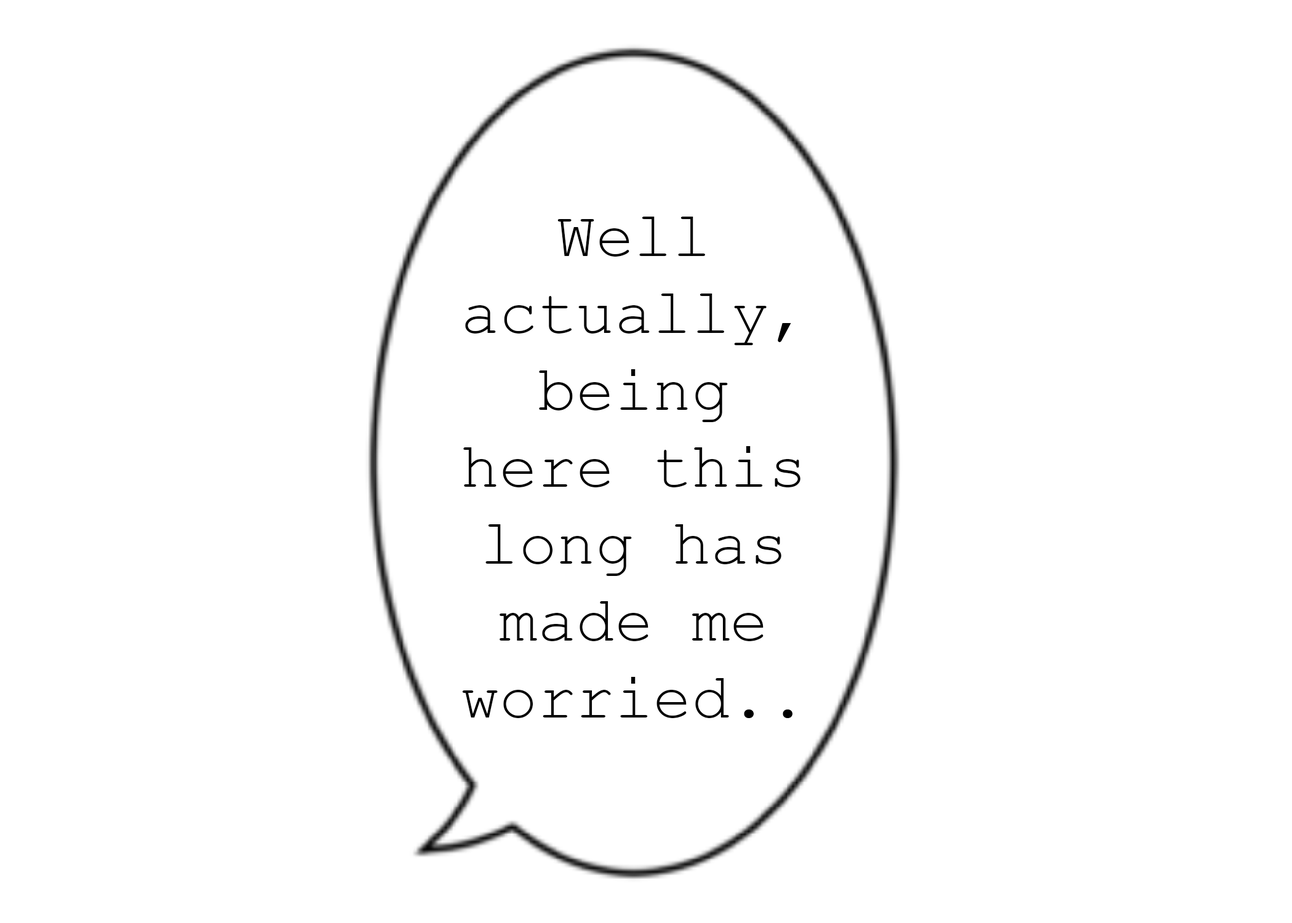
<style>
.page{position:relative;width:1292px;height:923px;background:#ffffff}
.page>*{position:absolute;margin:0}
.t1{font:64.1px "CourierNewPSMT";color:#000000}
</style>
<div class="page">
<p class="t1" style="left:462px;top:217px;width:338px;height:501px;text-align:center">Well actually, being here this long has made me worried..</p>
</div>
